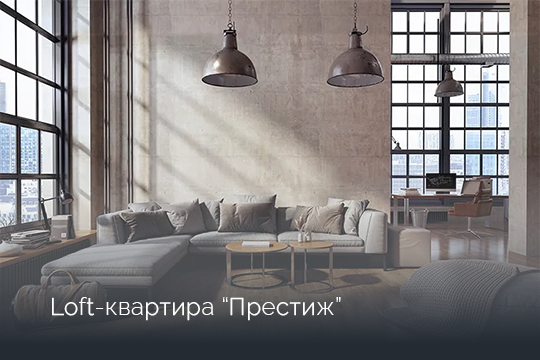
<style>
.page{position:relative;width:540px;height:360px}
.page>*{position:absolute;margin:0}
.t1{font:24px "RalewayRoman-Light";letter-spacing:0.02em;color:#ffffff}
</style>
<div class="page">
<p class="t1" style="left:52px;top:297px;width:289px;height:24px">Loft-квартира “Престиж”</p>
</div>
